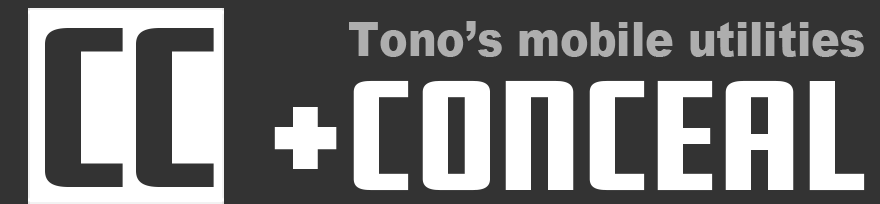
<style>
.page{position:relative;width:880px;height:204px;background:#333333}
.page>*{position:absolute;margin:0}
.t1{font:48px "Arial-Black";color:#aeaeae;scale:0.89 1}
.t2{font:136.9px "Fresno-Black";letter-spacing:0.025em;color:#ffffff;scale:1.41 1}
.t3{font:192px "Fresno-Black";letter-spacing:0.025em;color:#ffffff}
</style>
<div class="page">
<p class="t1" style="left:349px;top:21px;width:515px;height:36px">Tono’s mobile utilities</p>
<p class="t2" style="left:274px;top:80px;width:591px;height:111px"><span class="t3">+</span>Conceal</p>
</div>
